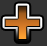
<style>
.page{position:relative;width:47px;height:46px;background:#333333}
.page>*{position:absolute;margin:0}
.t1{font:72px "FranklinGotT-Regu";font-weight:bold}
</style>
<div class="page">
<p class="t1" style="left:4px;top:5px;width:37px;height:35px">+</p>
</div>
